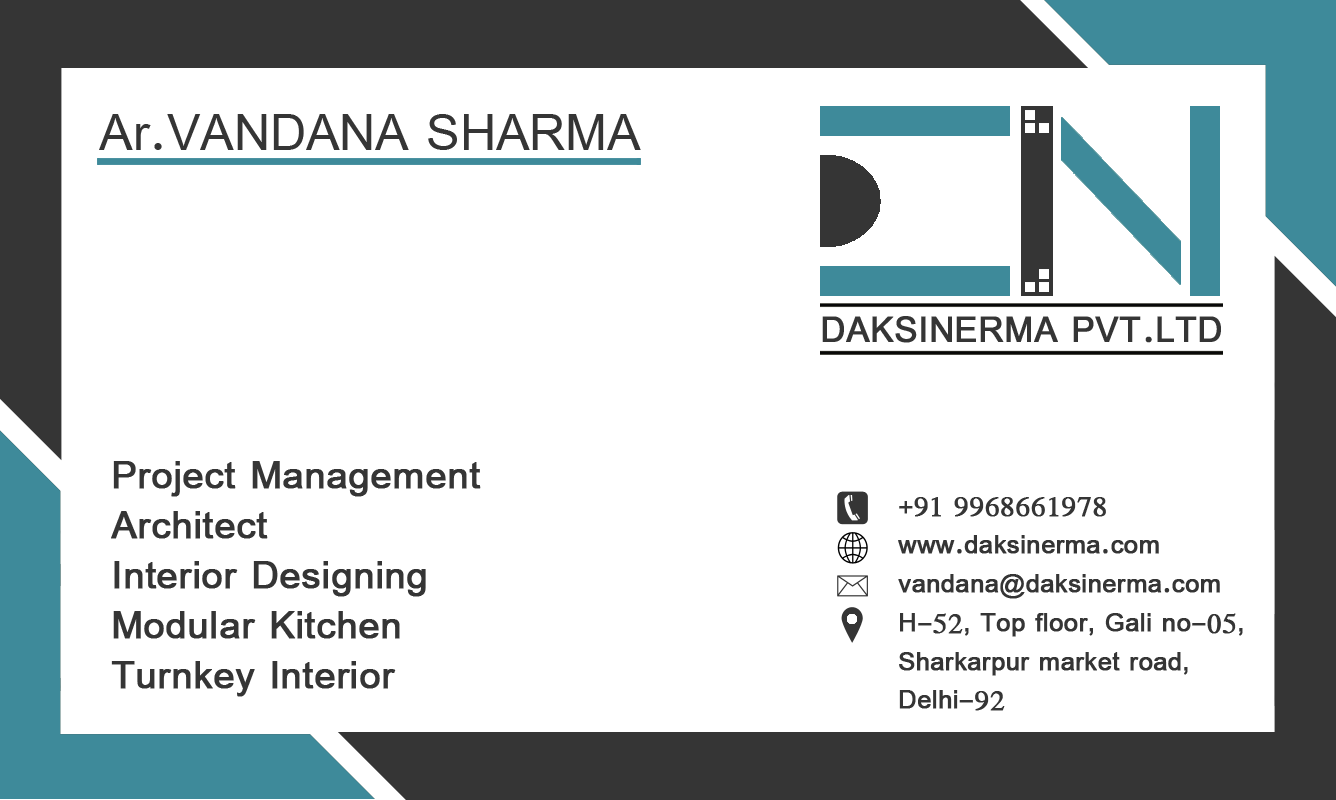
<style>
.page{position:relative;width:1336px;height:800px;background:#ffffff}
.page>*{position:absolute;margin:0}
.t1{font:55.6px "SimplifiedArabic";color:#353535}
.t2{font:38.9px "SimplifiedArabic";color:#353535;font-weight:bold}
.t3{font:41.7px "SimplifiedArabic";color:#353535;font-weight:bold}
.t4{font:27.8px/38.9px "SimplifiedArabic";color:#353535;font-weight:bold}
</style>
<div class="page">
<p class="t1" style="left:99px;top:114px;width:542px;height:36px">Ar.VANDANA SHARMA</p>
<p class="t2" style="left:822px;top:316px;width:399px;height:27px">DAKSINERMA PVT.LTD</p>
<p class="t3" style="left:111px;top:461px;width:370px;height:236px">Project Management<br>Architect<br>Interior Designing<br>Modular Kitchen<br>Turnkey Interior</p>
<p class="t4" style="left:898px;top:497px;width:345px;height:214px">+91 9968661978<br>www.daksinerma.com<br>vandana@daksinerma.com<br>H-52, Top floor, Gali no-05,<br>Sharkarpur market road,<br>Delhi-92</p>
</div>
